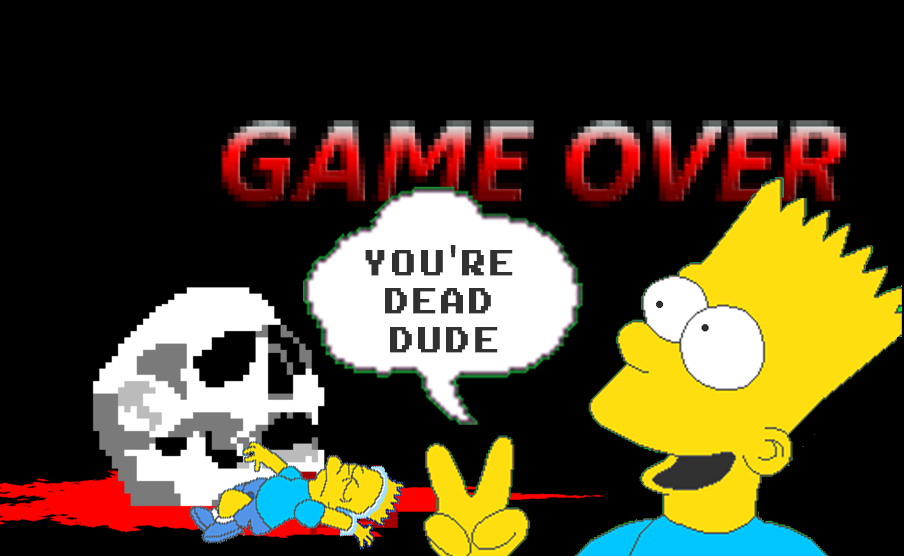
<style>
.page{position:relative;width:904px;height:556px;background:#000000}
.page>*{position:absolute;margin:0}
.t1{font:48px "ArcadeClassic";letter-spacing:0.1em;color:#313131;font-weight:bold;scale:0.87 1}
.t2{font:48px "MyriadPro-Regular";letter-spacing:0.1em;color:#313131;font-weight:bold;scale:0.87 1}
</style>
<div class="page">
<p class="t1" style="left:365px;top:245px;width:148px;height:108px;text-align:center">YOU<span class="t2">'</span>RE <br>DEAD <br>DUDE</p>
</div>
